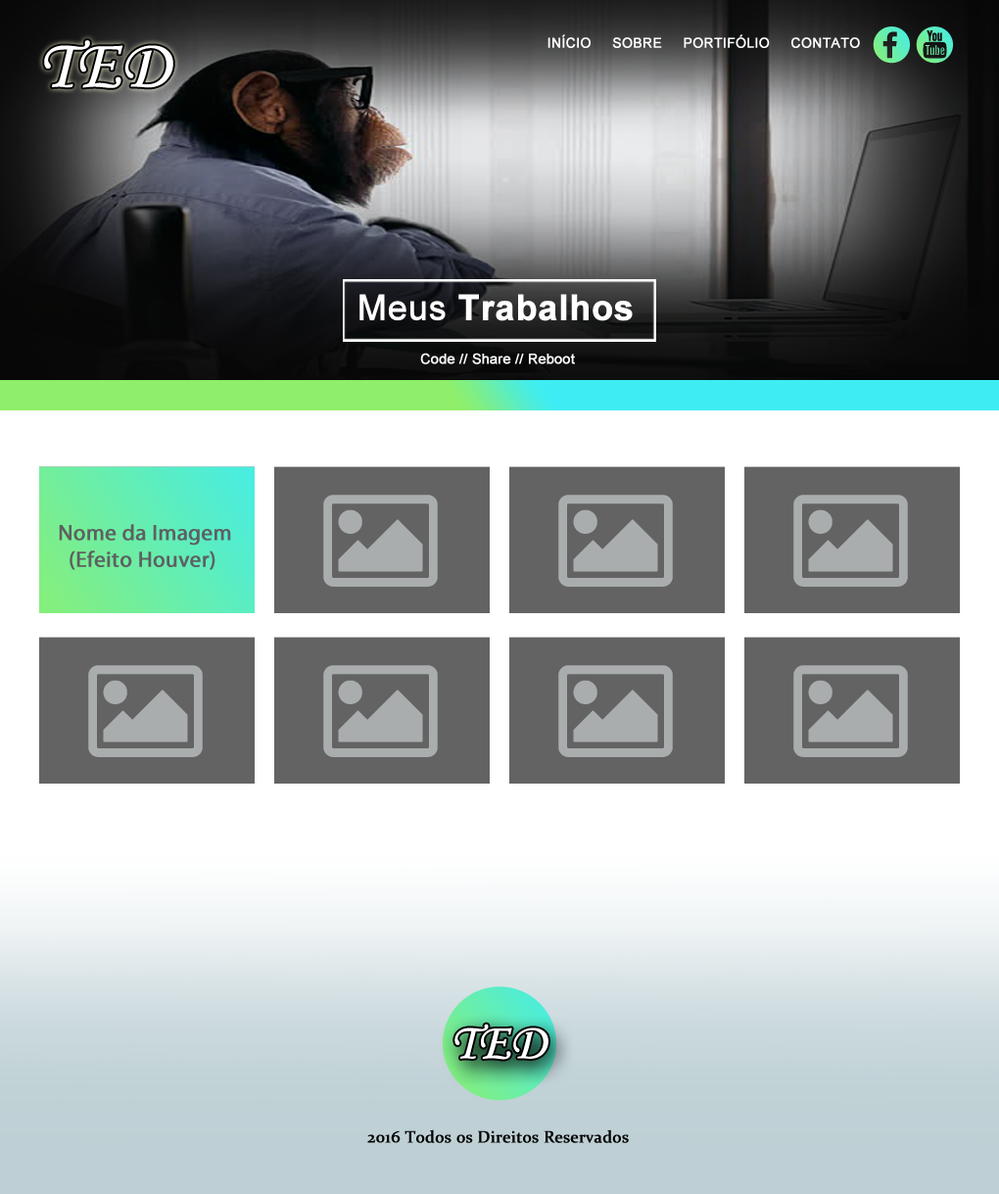
<style>
.page{position:relative;width:999px;height:1194px}
.page>*{position:absolute;margin:0}
.t1{font:69.4px "MonotypeCorsiva";color:#ffffff;font-weight:bold}
.t2{font:13.7px "ArialMT";color:#ffffff;font-weight:bold}
.t3{font:35.2px "Arial-BoldMT";color:#ffffff;font-weight:bold}
.t4{font:35.2px "ArialMT";color:#ffffff;font-weight:bold}
.t5{font:13.9px "ArialMT";color:#ffffff;font-weight:bold}
.t6{font:22.2px "MyriadPro-Regular";color:#5e6061;font-weight:bold}
.t7{font:50.3px "MonotypeCorsiva";color:#ffffff;font-weight:bold}
.t8{font:16.7px "Constantia";color:#000000;font-weight:bold}
</style>
<div class="page">
<p class="t1" style="left:44px;top:40px;width:129px;height:48px">TED</p>
<p class="t2" style="left:547px;top:34px;width:313px;height:14px">INÍCIO     SOBRE     PORTIFÓLIO     CONTATO</p>
<p class="t3" style="left:359px;top:294px;width:274px;height:27px"><span class="t4">Meus</span> Trabalhos</p>
<p class="t5" style="left:420px;top:353px;width:155px;height:11px">Code // Share // Reboot</p>
<p class="t6" style="left:59px;top:524px;width:172px;height:46px">Nome da Imagem<br>  (Efeito Houver)</p>
<p class="t7" style="left:454px;top:1023px;width:94px;height:37px">TED</p>
<p class="t8" style="left:367px;top:1129px;width:262px;height:14px">2016 Todos os Direitos Reservados</p>
</div>
